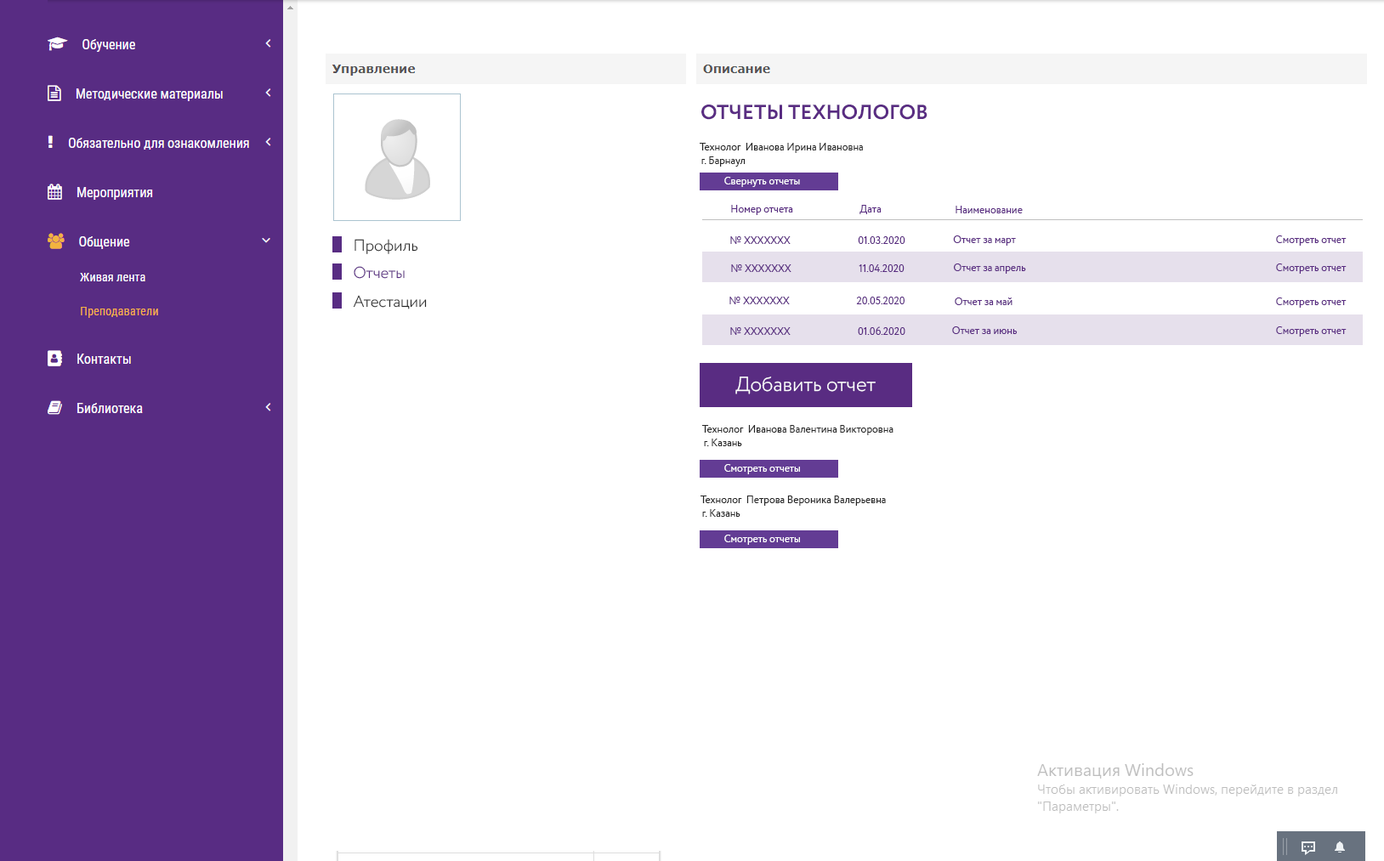
<style>
.page{position:relative;width:1384px;height:861px;background:#ffffff}
.page>*{position:absolute;margin:0}
.t1{font:20.4px "Circe-Bold";color:#592c82;text-transform:uppercase}
.t2{font:10.2px "Circe-Regular";color:#272727}
.t3{font:10.2px "Circe-Regular";color:#ffffff}
.t4{font:10.2px "Circe-Regular";color:#592c81}
.t5{font:15.9px "Circe-Light";color:#272727}
.t6{font:15.9px "Circe-Light";color:#592c82}
.t7{font:20.4px "Circe-Light";color:#ffffff}
</style>
<div class="page">
<p class="t1" style="left:702px;top:105px;width:226px;height:15px">Отчеты технологов</p>
<p class="t2" style="left:700px;top:143px;width:163px;height:10px">Технолог  Иванова Ирина Ивановна</p>
<p class="t2" style="left:702px;top:156px;width:44px;height:11px">г. Барнаул</p>
<p class="t3" style="left:724px;top:177px;width:76px;height:10px">Свернуть отчеты</p>
<p class="t4" style="left:731px;top:205px;width:62px;height:10px">Номер отчета</p>
<p class="t4" style="left:860px;top:205px;width:22px;height:9px">Дата</p>
<p class="t4" style="left:956px;top:206px;width:67px;height:7px">Наименование</p>
<p class="t5" style="left:355px;top:239px;width:63px;height:15px">Профиль</p>
<p class="t4" style="left:730px;top:236px;width:61px;height:8px">№ ХХХХХХХ</p>
<p class="t4" style="left:858px;top:236px;width:48px;height:8px">01.03.2020</p>
<p class="t4" style="left:953px;top:236px;width:63px;height:10px">Отчет за март</p>
<p class="t4" style="left:1276px;top:236px;width:71px;height:10px">Смотреть отчет</p>
<p class="t6" style="left:354px;top:266px;width:51px;height:13px">Отчеты</p>
<p class="t4" style="left:731px;top:264px;width:61px;height:8px">№ ХХХХХХХ</p>
<p class="t4" style="left:859px;top:264px;width:46px;height:8px">11.04.2020</p>
<p class="t4" style="left:954px;top:264px;width:72px;height:10px">Отчет за апрель</p>
<p class="t4" style="left:1276px;top:264px;width:71px;height:10px">Смотреть отчет</p>
<p class="t5" style="left:353px;top:295px;width:74px;height:15px">Атестации</p>
<p class="t4" style="left:730px;top:297px;width:60px;height:7px">№ ХХХХХХХ</p>
<p class="t4" style="left:856px;top:297px;width:49px;height:7px">20.05.2020</p>
<p class="t4" style="left:955px;top:298px;width:58px;height:7px">Отчет за май</p>
<p class="t4" style="left:1276px;top:298px;width:71px;height:10px">Смотреть отчет</p>
<p class="t4" style="left:730px;top:327px;width:61px;height:8px">№ ХХХХХХХ</p>
<p class="t4" style="left:858px;top:327px;width:48px;height:8px">01.06.2020</p>
<p class="t4" style="left:952px;top:327px;width:66px;height:7px">Отчет за июнь</p>
<p class="t4" style="left:1276px;top:327px;width:71px;height:10px">Смотреть отчет</p>
<p class="t7" style="left:736px;top:377px;width:140px;height:18px">Добавить отчет</p>
<p class="t2" style="left:702px;top:425px;width:192px;height:10px">Технолог  Иванова Валентина Викторовна</p>
<p class="t2" style="left:704px;top:439px;width:38px;height:7px">г. Казань</p>
<p class="t3" style="left:724px;top:464px;width:76px;height:10px">Смотреть отчеты</p>
<p class="t2" style="left:701px;top:496px;width:185px;height:10px">Технолог  Петрова Вероника Валерьевна</p>
<p class="t2" style="left:702px;top:509px;width:39px;height:8px">г. Казань</p>
<p class="t3" style="left:724px;top:535px;width:76px;height:10px">Смотреть отчеты</p>
</div>
